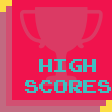
<style>
.page{position:relative;width:112px;height:112px;background:#f0134d}
.page>*{position:absolute;margin:0}
.t1{font:27px "ArcadeClassic";color:#40bfc1}
</style>
<div class="page">
<p class="t1" style="left:25px;top:59px;width:86px;height:34px;text-align:center">high<br>scores</p>
</div>
